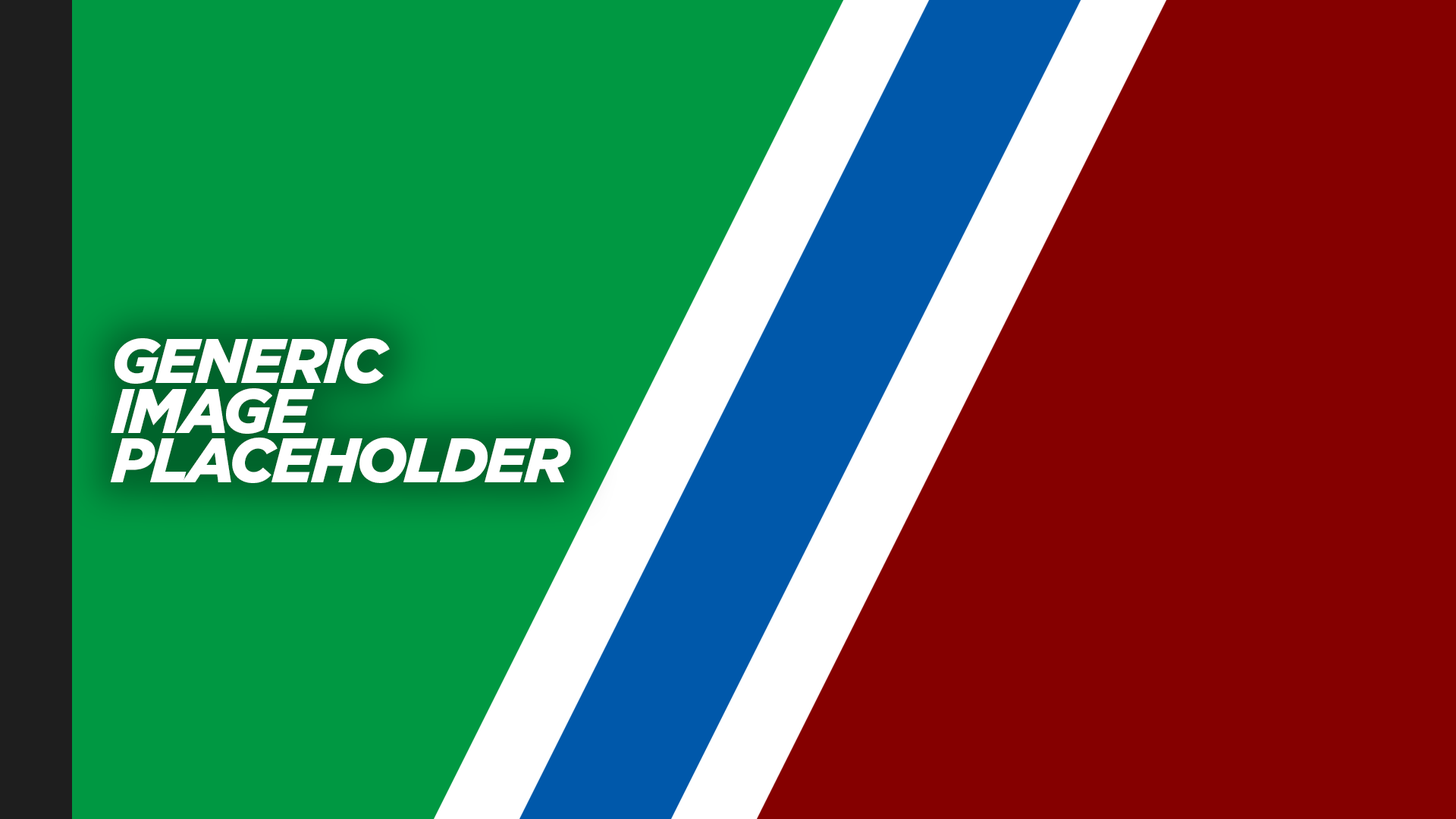
<style>
.page{position:relative;width:1456px;height:819px;background:#850000}
.page>*{position:absolute;margin:0}
.t1{font:62.5px/49.6px "GothamBlack-Italic";letter-spacing:-0.04em;color:#ffffff}
</style>
<div class="page">
<p class="t1" style="left:110px;top:338px;width:461px;height:145px">GENERIC<br>IMAGE<br>PLACEHOLDER</p>
</div>
